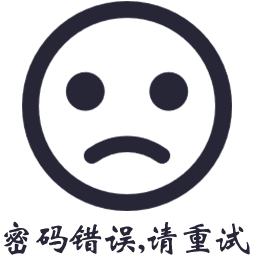
<style>
.page{position:relative;width:255px;height:255px;background:#ffffff}
.page>*{position:absolute;margin:0}
.t1{font:37.5px "STXinwei";letter-spacing:-0.08em;color:#272636}
</style>
<div class="page">
<p class="t1" style="left:4px;top:221px;width:246px;height:34px">密码错误,请重试</p>
</div>
